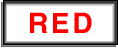
<style>
.page{position:relative;width:118px;height:48px;background:#ffffff}
.page>*{position:absolute;margin:0}
.t1{font:28px "Helvetica-Bold";letter-spacing:0.1em;color:#ff0000}
</style>
<div class="page">
<p class="t1" style="left:30px;top:12px;width:62px;height:21px">RED</p>
</div>
